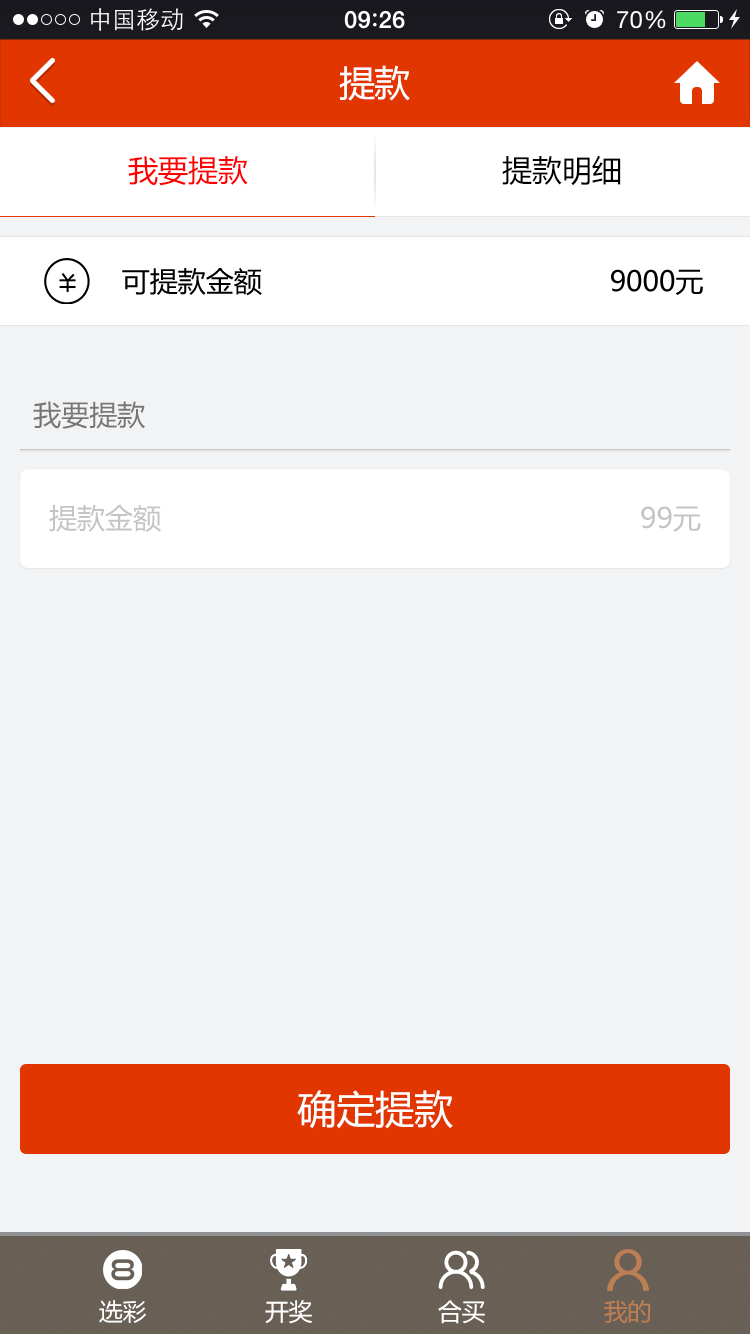
<style>
.page{position:relative;width:750px;height:1334px;background:#f2f3f5}
.page>*{position:absolute;margin:0}
.t1{font:36px "MicrosoftYaHei";letter-spacing:-0.025em;color:#ffffff}
.t2{font:30px "MicrosoftYaHei";color:#ff0000}
.t3{font:30px "MicrosoftYaHei";color:#000000}
.t4{font:28px "MicrosoftYaHei";color:#000000}
.t5{font:28px "MicrosoftYaHei";color:#767676}
.t6{font:28px "MicrosoftYaHei";color:#c4c4c4}
.t7{font:39px "MicrosoftYaHei";color:#ffffff}
.t8{font:24px "MicrosoftYaHei";letter-spacing:-0.025em;color:#ffffff}
.t9{font:24px "MicrosoftYaHei";letter-spacing:-0.025em;color:#bc7e53}
</style>
<div class="page">
<p class="t1" style="left:339px;top:65px;width:71px;height:36px">提款</p>
<p class="t2" style="left:128px;top:156px;width:120px;height:30px">我要提款</p>
<p class="t3" style="left:502px;top:155px;width:119px;height:31px">提款明细</p>
<p class="t4" style="left:122px;top:268px;width:140px;height:28px">可提款金额</p>
<p class="t4" style="left:611px;top:269px;width:92px;height:26px">9000元</p>
<p class="t5" style="left:33px;top:401px;width:112px;height:28px">我要提款</p>
<p class="t6" style="left:49px;top:504px;width:112px;height:28px">提款金额</p>
<p class="t6" style="left:641px;top:506px;width:60px;height:26px">99元</p>
<p class="t7" style="left:297px;top:1090px;width:156px;height:39px">确定提款</p>
<p class="t8" style="left:99px;top:1300px;width:47px;height:23px">选彩</p>
<p class="t8" style="left:265px;top:1300px;width:48px;height:24px">开奖</p>
<p class="t8" style="left:438px;top:1300px;width:47px;height:24px">合买</p>
<p class="t9" style="left:604px;top:1300px;width:47px;height:23px">我的</p>
</div>
